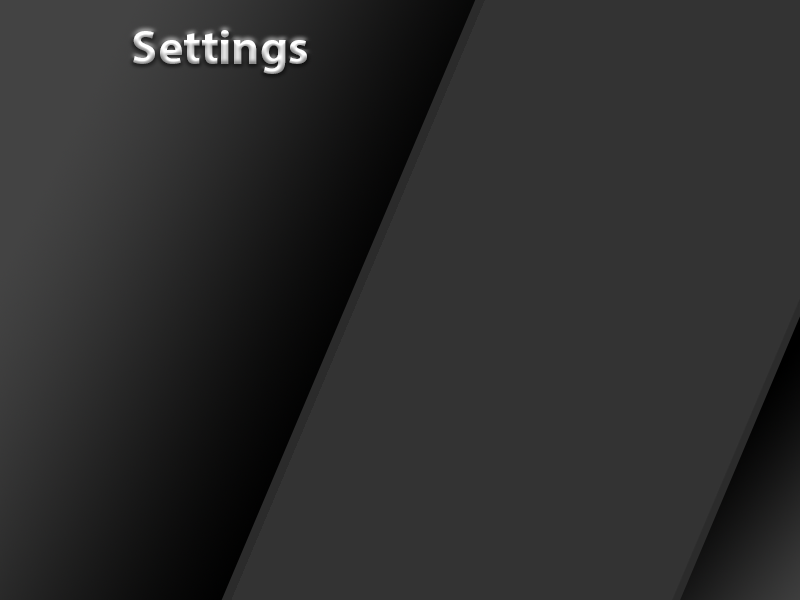
<style>
.page{position:relative;width:800px;height:600px;background:#333333}
.page>*{position:absolute;margin:0}
.t1{font:48px "MyriadPro-Bold"}
</style>
<div class="page">
<p class="t1" style="left:133px;top:30px;width:174px;height:44px">Settings</p>
</div>
